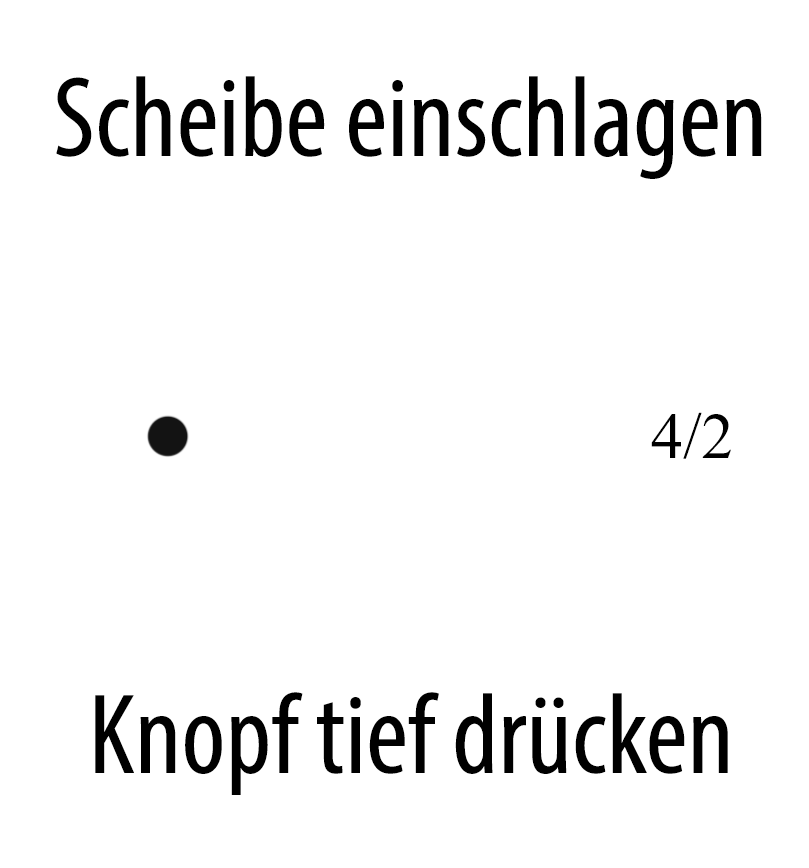
<style>
.page{position:relative;width:809px;height:868px;background:#ffffff}
.page>*{position:absolute;margin:0}
.t1{font:115px "MyriadPro-Cond";color:#000000}
.t2{font:65px "TimesNewRomanPSMT";color:#000000}
</style>
<div class="page">
<p class="t1" style="left:56px;top:76px;width:706px;height:103px">Scheibe einschlagen</p>
<p class="t2" style="left:651px;top:412px;width:80px;height:47px">4/2</p>
<p class="t1" style="left:95px;top:692px;width:633px;height:103px">Knopf tief drücken</p>
</div>
